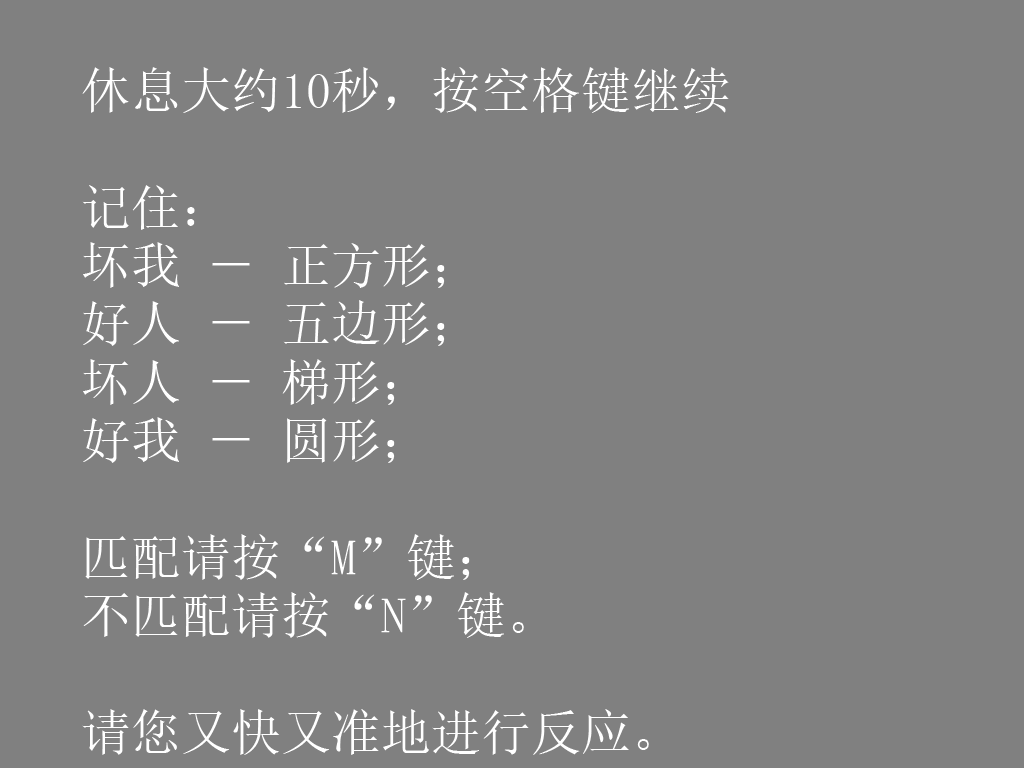
<style>
.page{position:relative;width:1024px;height:768px;background:#808080}
.page>*{position:absolute;margin:0}
.t1{font:50px/58.3px "SimSun";color:#ffffff}
</style>
<div class="page">
<p class="t1" style="left:82px;top:67px;width:647px;height:688px">休息大约10秒，按空格键继续<br><br>记住： <br>坏我 － 正方形；<br>好人 － 五边形；<br>坏人 － 梯形；<br>好我 － 圆形；<br><br>匹配请按“M”键；<br>不匹配请按“N”键。<br><br>请您又快又准地进行反应。</p>
</div>
